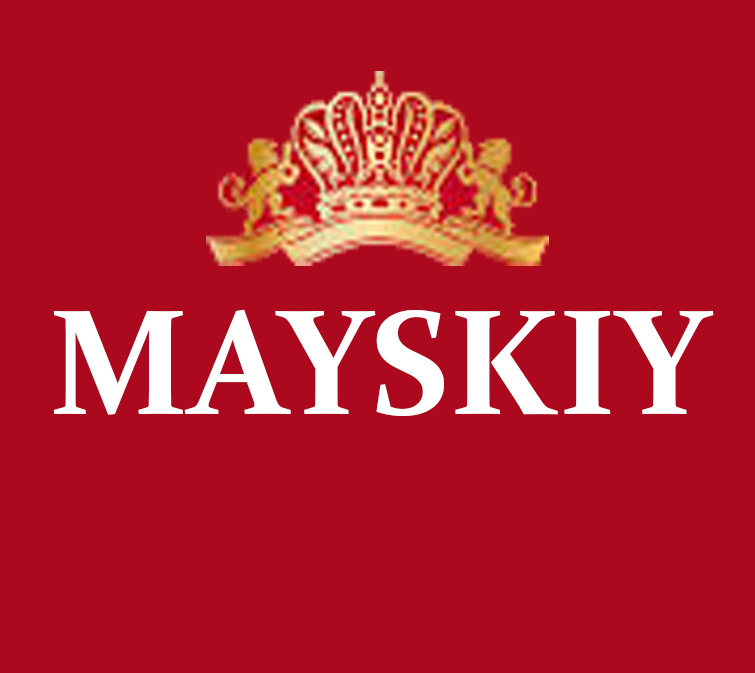
<style>
.page{position:relative;width:755px;height:673px;background:#ac091e}
.page>*{position:absolute;margin:0}
.t1{font:150px "Constantia-Bold";color:#ffffff}
</style>
<div class="page">
<p class="t1" style="left:53px;top:309px;width:661px;height:107px">MAYSKIY</p>
</div>
